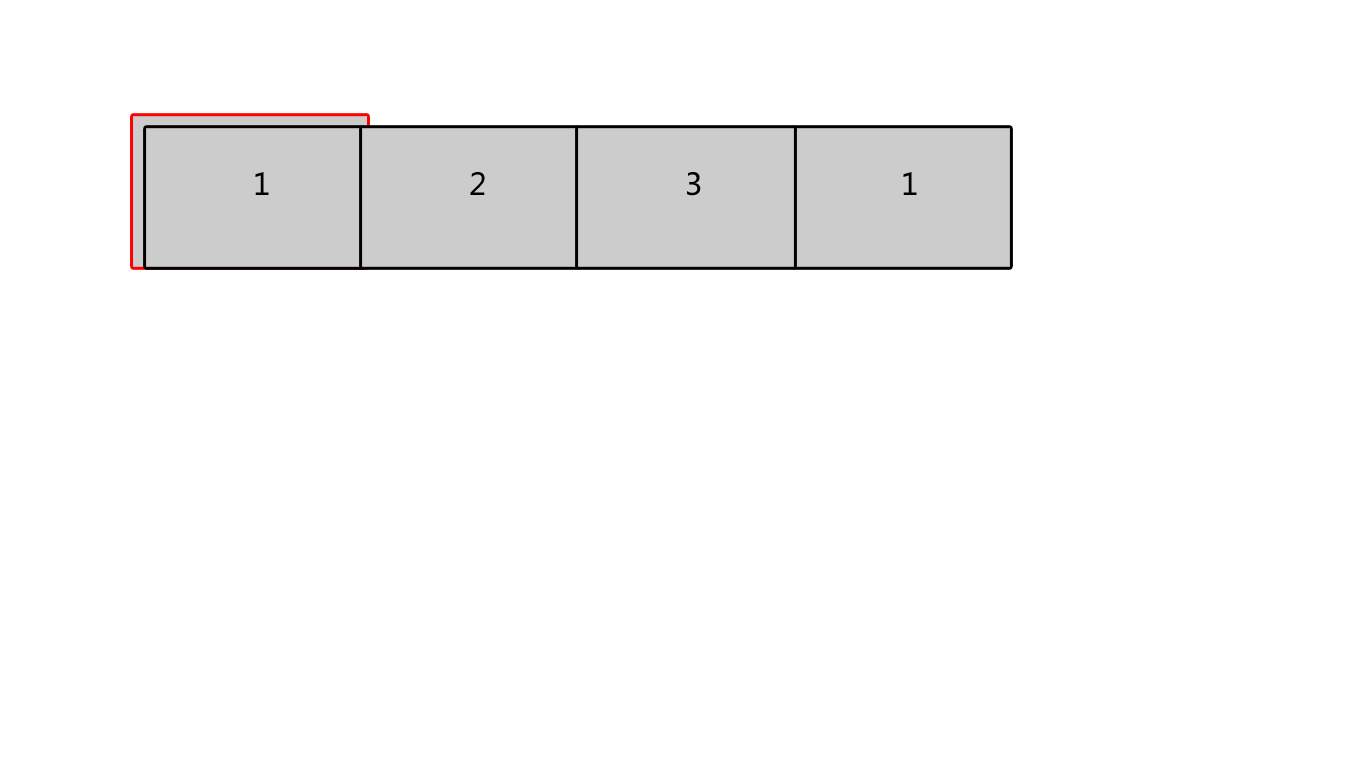
<style>
.page{position:relative;width:1366px;height:768px;background:#ffffff}
.page>*{position:absolute;margin:0}
.t1{font:30px "MicrosoftYaHei";color:#000000}
</style>
<div class="page">
<p class="t1" style="left:255px;top:172px;width:14px;height:23px">1</p>
<p class="t1" style="left:470px;top:172px;width:15px;height:23px">2</p>
<p class="t1" style="left:687px;top:172px;width:14px;height:24px">3</p>
<p class="t1" style="left:903px;top:172px;width:14px;height:23px">1</p>
</div>
